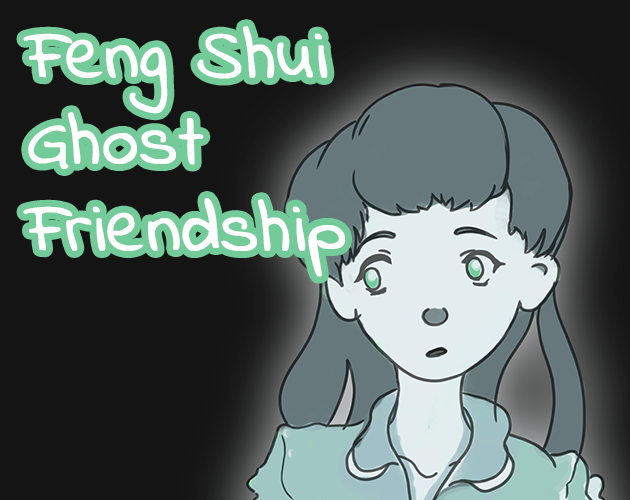
<style>
.page{position:relative;width:630px;height:500px;background:#141414}
.page>*{position:absolute;margin:0}
.t1{font:72px "IndieFlower";color:#ffffff;font-weight:bold}
</style>
<div class="page">
<p class="t1" style="left:23px;top:26px;width:322px;height:251px">Feng Shui<br>Ghost<br>Friendship</p>
</div>
